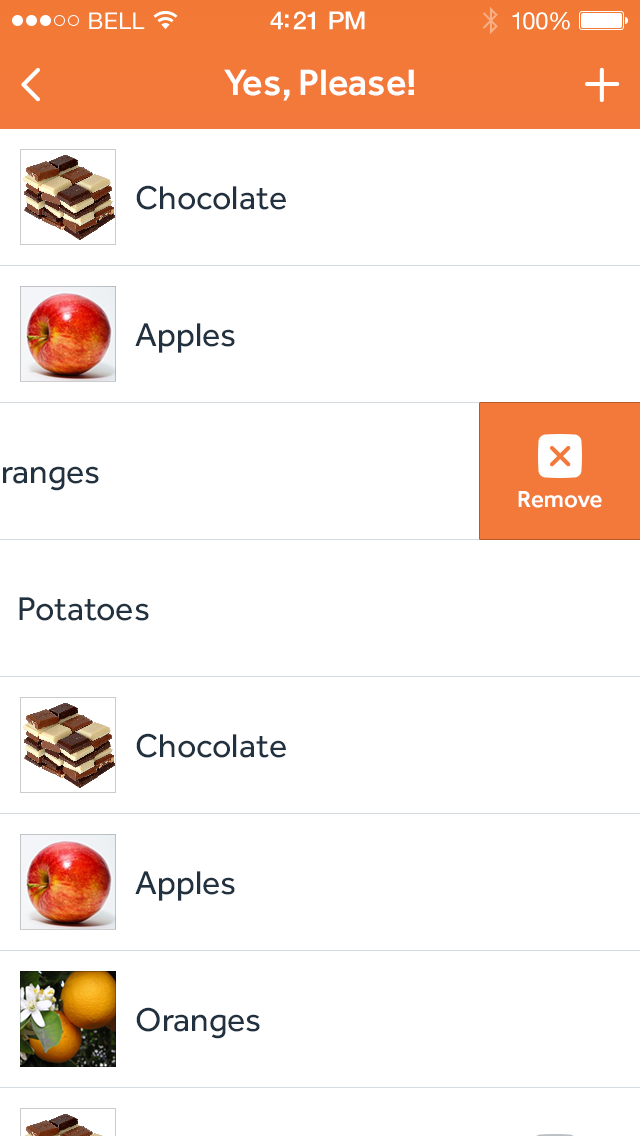
<style>
.page{position:relative;width:640px;height:1136px;background:#ffffff}
.page>*{position:absolute;margin:0}
.t1{font:23px "HelveticaNeue";letter-spacing:0.02em;color:#ffffff}
.t2{font:25px "HelveticaNeue-Medium";letter-spacing:-0.02em;color:#ffffff}
.t3{font:24px "HelveticaNeue";letter-spacing:-0.02em;color:#ffffff}
.t4{font:38px "Effra-Medium";color:#ffffff}
.t5{font:34px "Effra-Regular";color:#22313f}
.t6{font:24px "Effra-Medium";color:#ffffff}
</style>
<div class="page">
<p class="t1" style="left:89px;top:12px;width:56px;height:17px">BELL</p>
<p class="t2" style="left:270px;top:11px;width:95px;height:19px">4:21 PM</p>
<p class="t3" style="left:512px;top:12px;width:58px;height:18px">100%</p>
<p class="t4" style="left:224px;top:69px;width:190px;height:32px">Yes, Please!</p>
<p class="t5" style="left:136px;top:185px;width:150px;height:25px">Chocolate</p>
<p class="t5" style="left:135px;top:323px;width:100px;height:30px">Apples</p>
<p class="t6" style="left:518px;top:491px;width:84px;height:17px">Remove</p>
<p class="t5" style="left:19px;top:597px;width:130px;height:24px">Potatoes</p>
<p class="t5" style="left:136px;top:733px;width:150px;height:25px">Chocolate</p>
<p class="t5" style="left:135px;top:871px;width:100px;height:30px">Apples</p>
<p class="t5" style="left:136px;top:1007px;width:124px;height:32px">Oranges</p>
</div>
